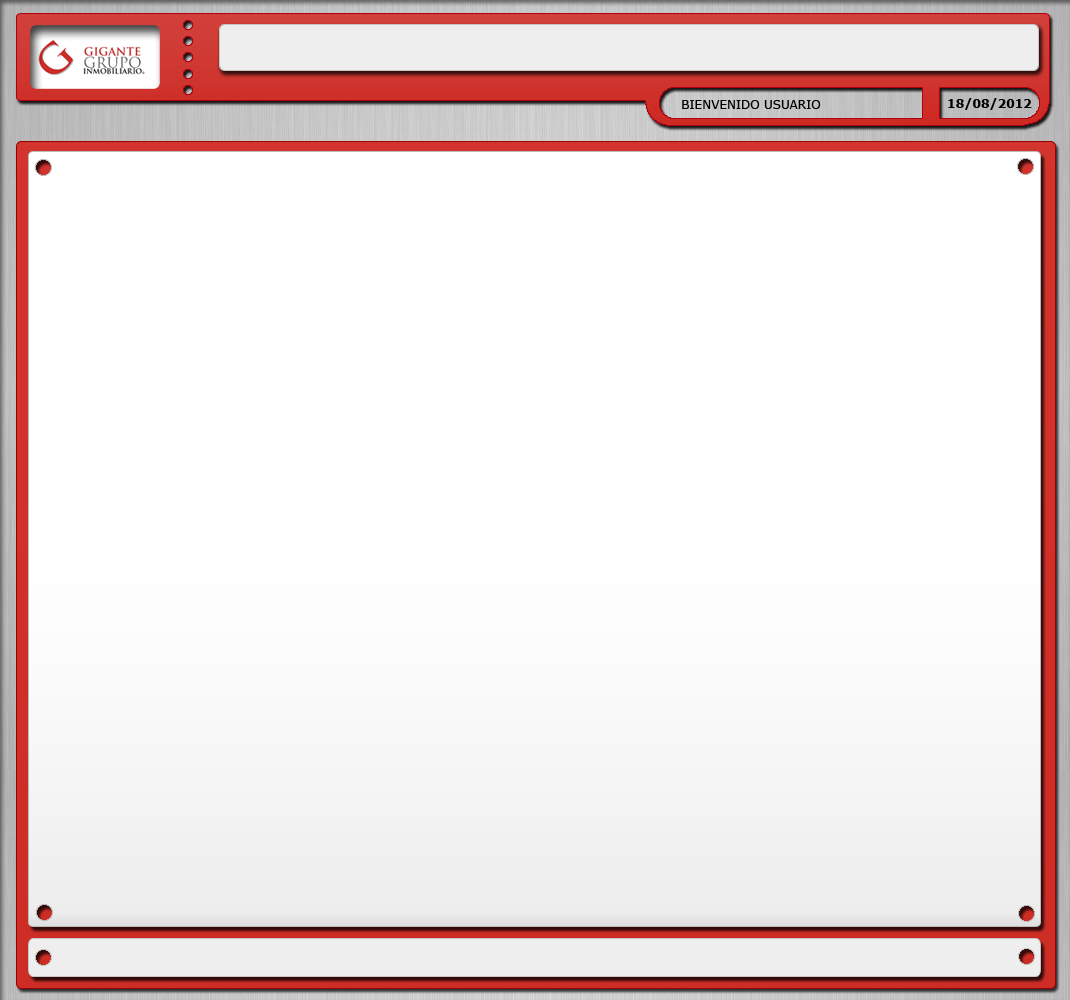
<style>
.page{position:relative;width:1070px;height:1000px;background:#ffffff}
.page>*{position:absolute;margin:0}
.t1{font:12px "Verdana";color:#000000}
.t2{font:12px "Verdana-Bold";color:#000000}
</style>
<div class="page">
<p class="t1" style="left:682px;top:100px;width:139px;height:9px">BIENVENIDO USUARIO</p>
<p class="t2" style="left:948px;top:98px;width:84px;height:12px">18/08/2012</p>
</div>
